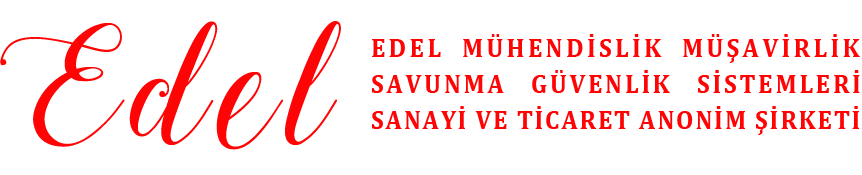
<style>
.page{position:relative;width:862px;height:175px;background:#ffffff}
.page>*{position:absolute;margin:0}
.t1{font:162.9px "StylishCalligraphyDemo";letter-spacing:0.07em;color:#ff0404}
.t2{font:27px "Cambria-Bold";letter-spacing:0.07em;color:#ff0404;scale:0.93 1}
.t3{font:27px "Cambria-Bold";letter-spacing:0.128em;color:#ff0404;scale:0.93 1}
.t4{font:27px "Cambria-Bold";letter-spacing:0.105em;color:#ff0404;scale:0.93 1}
</style>
<div class="page">
<p class="t1" style="left:0px;top:21px;width:341px;height:129px">Edel</p>
<p class="t2" style="left:372px;top:34px;width:488px;height:101px;text-align:justify"><span class="t3">EDEL  MÜHENDİSLİK  MÜŞAVİRLİK<br></span><span class="t4">SAVUNMA   GÜVENLİK   SİSTEMLERİ<br></span>SANAYİ VE TİCARET ANONİM ŞİRKETİ</p>
</div>
